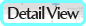
<style>
.page{position:relative;width:86px;height:26px;background:#77ffff}
.page>*{position:absolute;margin:0}
.t1{font:17.3px "AmiraParadiso";letter-spacing:-0.08em;color:#1f1f1f}
</style>
<div class="page">
<p class="t1" style="left:8px;top:6px;width:71px;height:13px">Detail View</p>
</div>
